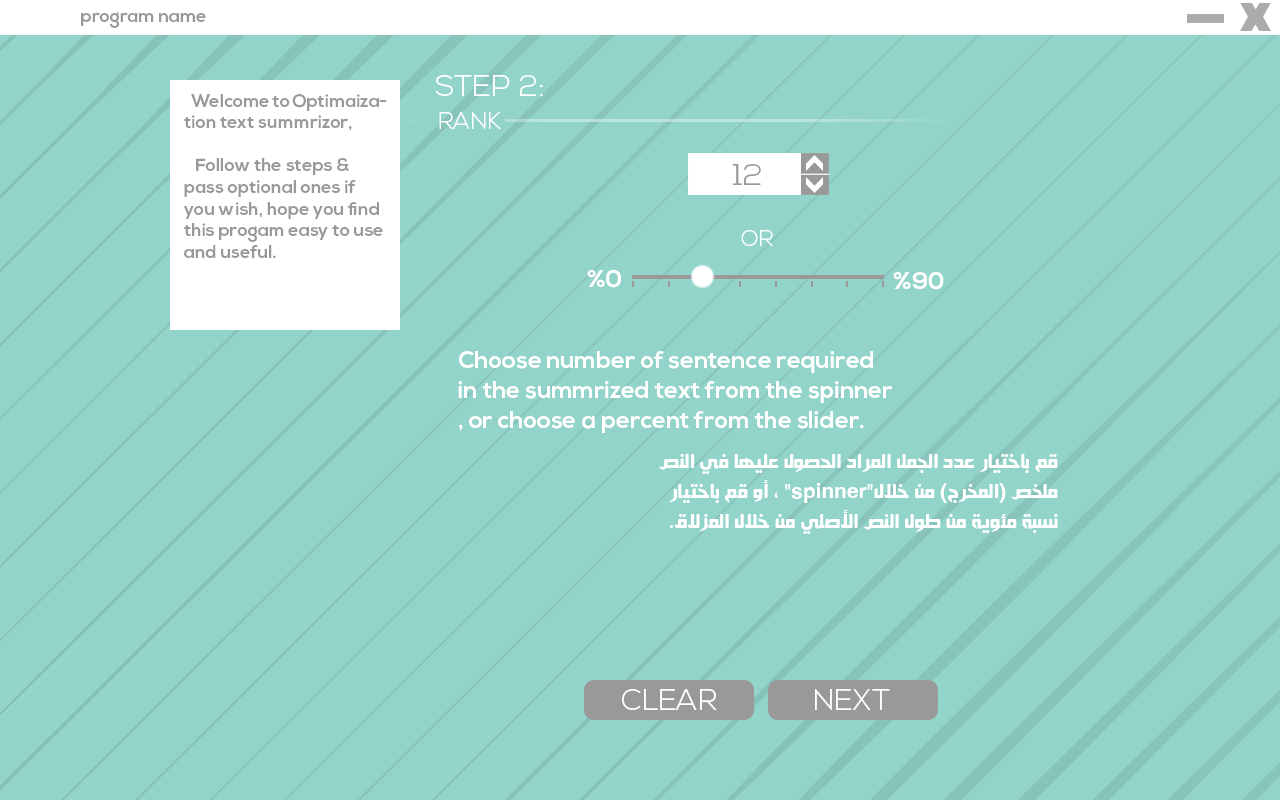
<style>
.page{position:relative;width:1280px;height:800px;background:#92d4ca}
.page>*{position:absolute;margin:0}
.t1{font:18px "NexaBold";color:#999999}
.t2{font:30px "NexaLight";color:#ffffff}
.t3{font:24px "NexaLight";color:#ffffff;text-transform:uppercase}
.t4{font:30px "NexaLight";color:#999999;text-transform:uppercase}
.t5{font:22.5px "NexaLight";color:#ffffff}
.t6{font:24px "NexaBold";color:#ffffff}
.t7{font:24px/30px "NexaBold";color:#ffffff}
.t8{font:24px/30px "HacenSamra";color:#ffffff}
.t9{font:30px "NexaLight";color:#ffffff;text-transform:uppercase}
</style>
<div class="page">
<p class="t1" style="left:81px;top:12px;width:125px;height:16px">program name</p>
<p class="t2" style="left:435px;top:75px;width:108px;height:22px">STEP 2:</p>
<p class="t1" style="left:184px;top:94px;width:203px;height:165px">Welcome to Optimaization text summrizor,<br><br>   Follow the steps &amp; pass optional ones if you wish, hope you find<br>this progam easy to use and useful.</p>
<p class="t3" style="left:439px;top:112px;width:62px;height:17px">rank</p>
<p class="t4" style="left:733px;top:164px;width:28px;height:21px">12</p>
<p class="t5" style="left:741px;top:230px;width:32px;height:16px">OR</p>
<p class="t6" style="left:587px;top:269px;width:34px;height:19px">0%</p>
<p class="t6" style="left:893px;top:271px;width:51px;height:19px">90%</p>
<p class="t7" style="left:458px;top:351px;width:435px;height:82px">Choose number of sentence required<br>in the summrized text from the spinner<br>, or choose a percent from the slider.</p>
<p class="t8" style="left:659px;top:454px;width:399px;height:80px">قم باختيار عدد الجمل المراد الحصول عليها في النص<br>ملخص (المخرج) من خلال“spinner” ، أو قم باختيار<br>نسبة مئوية من طول النص الأصلي من خلال المزلاق.</p>
<p class="t9" style="left:622px;top:689px;width:95px;height:21px">Clear</p>
<p class="t9" style="left:815px;top:689px;width:75px;height:21px">Next</p>
</div>
